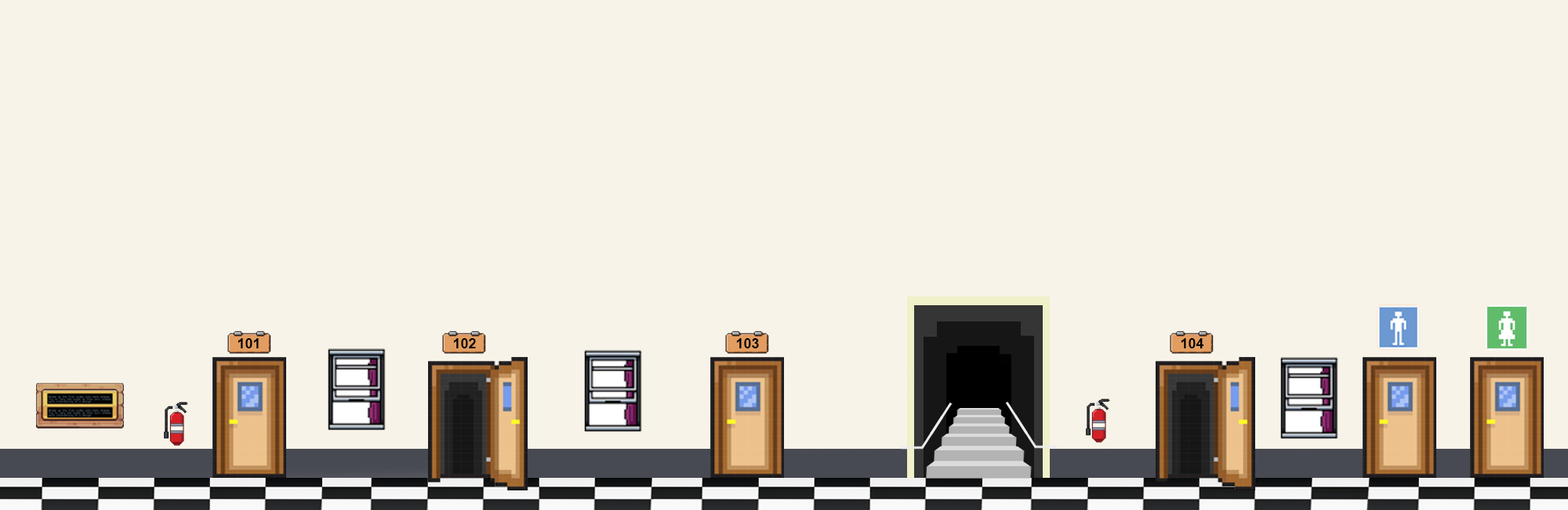
<style>
.page{position:relative;width:1568px;height:510px;background:#f8f3e8}
.page>*{position:absolute;margin:0}
.t1{font:14.1px "Arial-BoldMT";color:#000000}
</style>
<div class="page">
<p class="t1" style="left:238px;top:338px;width:21px;height:10px">101</p>
<p class="t1" style="left:453px;top:338px;width:23px;height:10px">102</p>
<p class="t1" style="left:736px;top:338px;width:23px;height:10px">103</p>
<p class="t1" style="left:1181px;top:338px;width:23px;height:10px">104</p>
</div>
